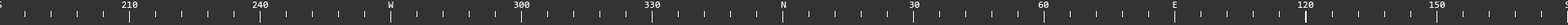
<style>
.page{position:relative;width:1568px;height:25px;background:#333333}
.page>*{position:absolute;margin:0}
.t1{font:9.5px "Consolas";letter-spacing:0.02em;color:#ffffff}
</style>
<div class="page">
<p class="t1" style="left:122px;top:2px;width:16px;height:6px">210</p>
<p class="t1" style="left:253px;top:2px;width:15px;height:6px">240</p>
<p class="t1" style="left:388px;top:2px;width:6px;height:6px">W</p>
<p class="t1" style="left:514px;top:2px;width:16px;height:6px">300</p>
<p class="t1" style="left:645px;top:2px;width:15px;height:6px">330</p>
<p class="t1" style="left:781px;top:2px;width:5px;height:6px">N</p>
<p class="t1" style="left:909px;top:2px;width:10px;height:6px">30</p>
<p class="t1" style="left:1038px;top:2px;width:11px;height:6px">60</p>
<p class="t1" style="left:1173px;top:2px;width:4px;height:6px">E</p>
<p class="t1" style="left:1298px;top:2px;width:16px;height:6px">120</p>
<p class="t1" style="left:1429px;top:2px;width:16px;height:6px">150</p>
</div>
